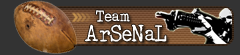
<style>
.page{position:relative;width:240px;height:55px;background:#333333}
.page>*{position:absolute;margin:0}
.t1{font:17.6px/19px "AcousticBass";letter-spacing:0.025em;color:#ffffff;scale:0.91 1}
.t2{font:13px/19px "AcousticBass";letter-spacing:0.025em;color:#ffffff}
.t3{font:12px/19px "AcousticBass";letter-spacing:0.025em;color:#ffffff}
</style>
<div class="page">
<p class="t1" style="left:84px;top:10px;width:83px;height:32px"><span class="t2">  </span><span class="t3">Team<br></span>ArSeNaL</p>
</div>
